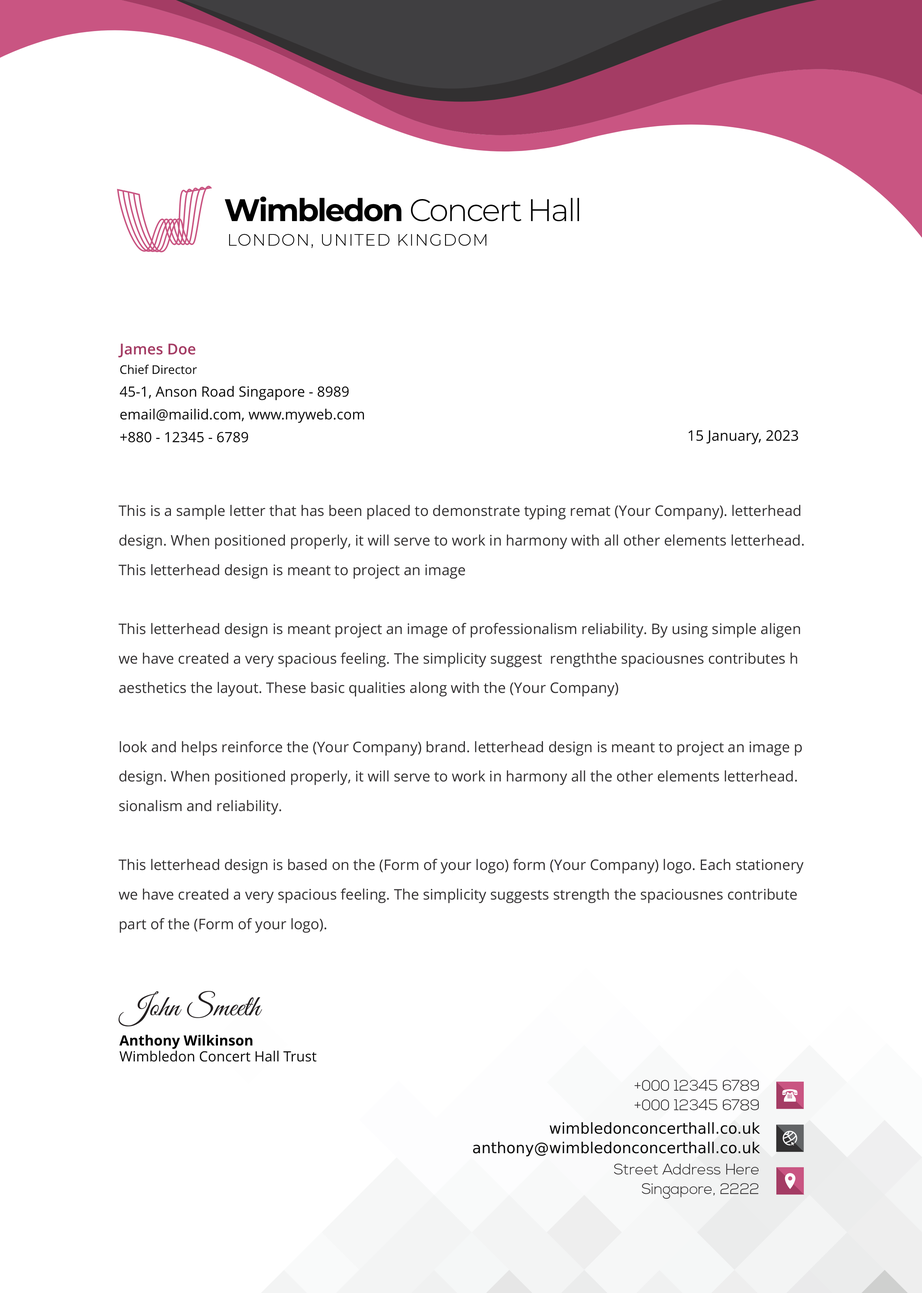
<style>
.page{position:relative;width:922px;height:1293px;background:#ffffff}
.page>*{position:absolute;margin:0}
.t1{font:31.3px "Montserrat-Light";letter-spacing:-0.05em;color:#000000}
.t2{font:31.3px "Montserrat-Bold";letter-spacing:-0.05em;color:#000000}
.t3{font:16.6px "Montserrat-Light";letter-spacing:0.06em;color:#000000}
.t4{font:14.2px/22.7px "OpenSans";color:#0d0d0d}
.t5{font:15.1px/22.7px "OpenSans-Semibold";color:#a43c64}
.t6{font:12px/19.7px "OpenSans";color:#0d0d0d}
.t7{font:14.6px "OpenSans";color:#0d0d0d}
.t8{font:14.6px/29.5px "OpenSans";color:#323031}
.t9{font:14.1px/15.9px "OpenSans";color:#0d0d0d}
.t10{font:14.1px/15.9px "OpenSans-Bold";color:#000000}
.t11{font:15.1px/19.5px "NexaLight";color:#323031}
.t12{font:15.1px/19.5px "NexaLight";color:#0d0d0d}
</style>
<div class="page">
<p class="t1" style="left:224px;top:196px;width:355px;height:26px"><span class="t2">Wimbledon </span>Concert Hall</p>
<p class="t3" style="left:229px;top:234px;width:257px;height:14px">LONDON, UNITED KINGDOM</p>
<p class="t4" style="left:118px;top:344px;width:246px;height:99px"><span class="t5">James Doe<br></span><span class="t6">Chief Director<br></span>45-1, Anson Road Singapore - 8989<br>email@mailid.com, www.myweb.com<br>+880 - 12345 - 6789</p>
<p class="t7" style="left:688px;top:430px;width:110px;height:15px">15 January, 2023</p>
<p class="t8" style="left:119px;top:505px;width:685px;height:428px;text-align:justify">This is a sample letter that has been placed to demonstrate typing remat (Your Company). letterhead<br>design. When positioned properly, it will serve to work in harmony with all other elements letterhead.<br>This letterhead design is meant to project an image <br><br>This letterhead design is meant project an image of professionalism reliability. By using simple aligen<br>we have created a very spacious feeling. The simplicity suggest  rengththe spaciousnes contributes h<br>aesthetics the layout. These basic qualities along with the (Your Company)<br> <br>look and helps reinforce the (Your Company) brand. letterhead design is meant to project an image p<br>design. When positioned properly, it will serve to work in harmony all the other elements letterhead.<br>sionalism and reliability.  <br><br>This letterhead design is based on the (Form of your logo) form (Your Company) logo. Each stationery<br>we have created a very spacious feeling. The simplicity suggests strength the spaciousnes contribute<br>part of the (Form of your logo).</p>
<p class="t9" style="left:119px;top:1035px;width:198px;height:27px"><span class="t10">Anthony Wilkinson<br></span>Wimbledon Concert Hall Trust</p>
<p class="t11" style="left:634px;top:1080px;width:125px;height:31px;text-align:right">+000 12345 6789<br>+000 12345 6789</p>
<p class="t12" style="left:473px;top:1122px;width:287px;height:35px;text-align:right">wimbledonconcerthall.co.uk<br>anthony@wimbledonconcerthall.co.uk</p>
<p class="t11" style="left:614px;top:1164px;width:145px;height:35px;text-align:right">Street Address Here<br>Singapore, 2222</p>
</div>
